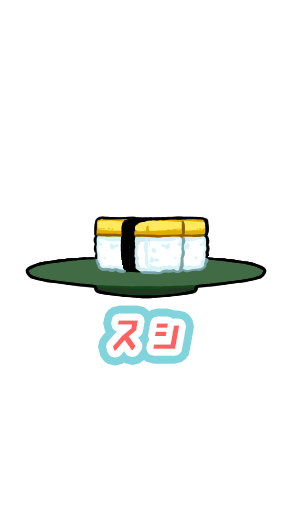
<style>
.page{position:relative;width:285px;height:515px;background:#ffffff}
.page>*{position:absolute;margin:0}
.t1{font:41.7px "Kaiso-Makina-B";letter-spacing:-0.075em;color:#ff6060;font-weight:bold;font-style:italic}
</style>
<div class="page">
<p class="t1" style="left:113px;top:320px;width:66px;height:31px">スシ</p>
</div>
